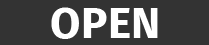
<style>
.page{position:relative;width:209px;height:45px;background:#333333}
.page>*{position:absolute;margin:0}
.t1{font:44px "FiraSans-Bold";color:#ffffff;text-transform:uppercase}
</style>
<div class="page">
<p class="t1" style="left:51px;top:7px;width:107px;height:32px">open</p>
</div>
